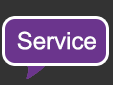
<style>
.page{position:relative;width:113px;height:85px;background:#333333}
.page>*{position:absolute;margin:0}
.t1{font:24px "ArialMT";color:#ffffff}
</style>
<div class="page">
<p class="t1" style="left:17px;top:31px;width:79px;height:19px">Service</p>
</div>
